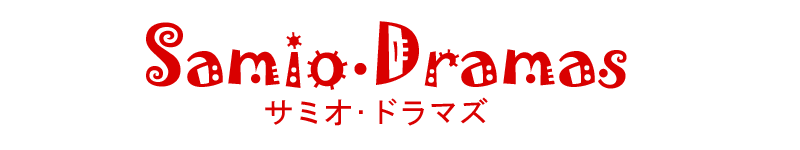
<style>
.page{position:relative;width:800px;height:150px;background:#ffffff}
.page>*{position:absolute;margin:0}
.t1{font:72px "Jokerman-Regular";color:#d90000}
.t2{font:36px "Jokerman-Regular";color:#d90000}
.t3{font:30px "MS-Gothic";color:#d90000}
.t4{font:30px "Jokerman-Regular";color:#d90000}
</style>
<div class="page">
<p class="t1" style="left:146px;top:21px;width:481px;height:69px">Samio<span class="t2">•</span>Dramas</p>
<p class="t3" style="left:265px;top:97px;width:223px;height:29px"><span class="t4">サミオドラマズ</span>サミオ•ドラマズ</p>
</div>
